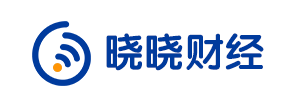
<style>
.page{position:relative;width:300px;height:100px;background:#ffffff}
.page>*{position:absolute;margin:0}
.t1{font:40px "FZY4JW--GB1-0";color:#003b9d}
</style>
<div class="page">
<p class="t1" style="left:106px;top:33px;width:158px;height:38px">晓晓财经</p>
</div>
